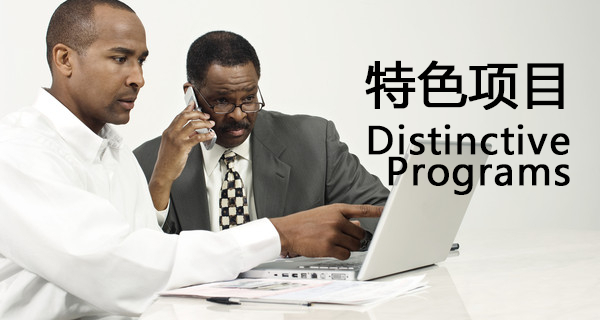
<style>
.page{position:relative;width:600px;height:320px}
.page>*{position:absolute;margin:0}
.t1{font:49.4px "MicrosoftYaHei";letter-spacing:0.02em;color:#000000;font-weight:bold}
.t2{font:37.5px/31.4px "MicrosoftYaHei";letter-spacing:0.02em;color:#000000;font-weight:bold}
</style>
<div class="page">
<p class="t1" style="left:365px;top:60px;width:199px;height:50px">特色项目</p>
<p class="t2" style="left:368px;top:124px;width:202px;height:71px;text-align:right">Distinctive Programs</p>
</div>
